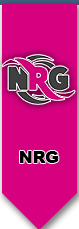
<style>
.page{position:relative;width:79px;height:229px;background:#d70180}
.page>*{position:absolute;margin:0}
.t1{font:16.7px "Arial-Black";letter-spacing:-0.01em;color:#000000}
</style>
<div class="page">
<p class="t1" style="left:20px;top:151px;width:39px;height:12px">NRG</p>
</div>
